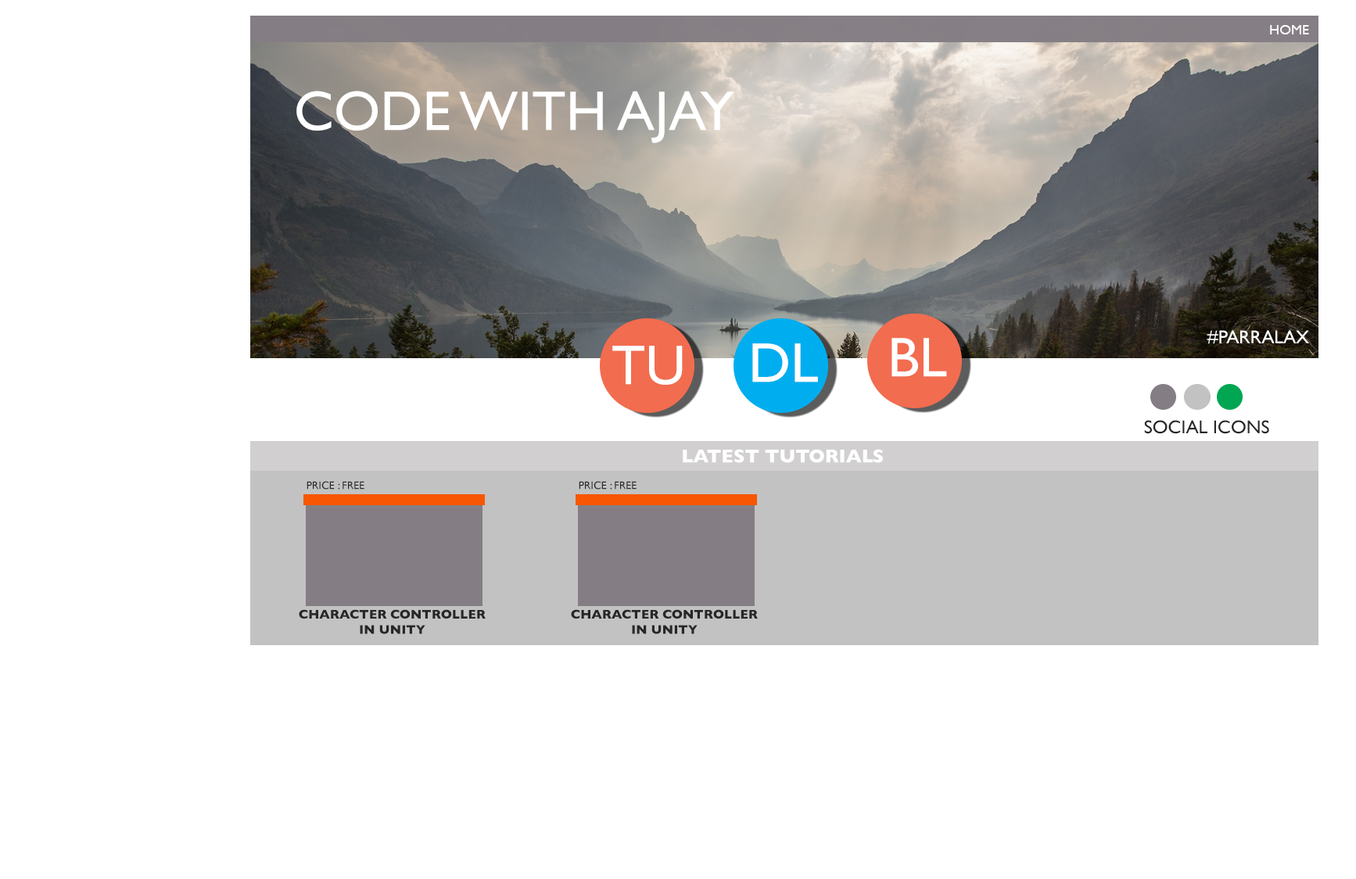
<style>
.page{position:relative;width:1356px;height:879px;background:#ffffff}
.page>*{position:absolute;margin:0}
.t1{font:14.1px "GillSans";color:#ffffff}
.t2{font:56.3px "GillSans";color:#ffffff}
.t3{font:18.8px "GillSans";color:#ffffff}
.t4{font:18.8px "GillSans";color:#272727}
.t5{font:18.8px "GillSans-Bold";color:#ffffff}
.t6{font:11px "GillSans";color:#272727}
.t7{font:12.7px "GillSans-Bold";color:#272727}
</style>
<div class="page">
<p class="t1" style="left:1270px;top:25px;width:39px;height:9px">HOME</p>
<p class="t2" style="left:296px;top:91px;width:438px;height:52px">CODE WITH AJAY</p>
<p class="t2" style="left:892px;top:338px;width:55px;height:39px">BL</p>
<p class="t3" style="left:1207px;top:330px;width:102px;height:14px">#PARRALAX</p>
<p class="t2" style="left:612px;top:346px;width:71px;height:39px">TU</p>
<p class="t2" style="left:752px;top:343px;width:66px;height:39px">DL</p>
<p class="t4" style="left:1144px;top:420px;width:125px;height:14px">SOCIAL ICONS</p>
<p class="t5" style="left:683px;top:449px;width:200px;height:14px">LATEST TUTORIALS</p>
<p class="t6" style="left:307px;top:481px;width:57px;height:9px">PRICE : FREE</p>
<p class="t6" style="left:579px;top:481px;width:58px;height:9px">PRICE : FREE</p>
<p class="t7" style="left:299px;top:609px;width:187px;height:25px;text-align:center">CHARACTER CONTROLLER<br>IN UNITY</p>
<p class="t7" style="left:571px;top:609px;width:187px;height:25px;text-align:center">CHARACTER CONTROLLER<br>IN UNITY</p>
</div>
